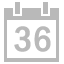
<style>
.page{position:relative;width:64px;height:64px;background:#ffffff}
.page>*{position:absolute;margin:0}
.t1{font:36px "FranklinGothic-MediumCond";letter-spacing:-0.01em;color:#b9b9b9;font-weight:bold}
</style>
<div class="page">
<p class="t1" style="left:14px;top:26px;width:37px;height:26px">36</p>
</div>
